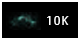
<style>
.page{position:relative;width:80px;height:40px;background:#000000}
.page>*{position:absolute;margin:0}
.t1{font:12px "DroidSansMono";letter-spacing:0.045em;color:#ffffff}
</style>
<div class="page">
<p class="t1" style="left:47px;top:16px;width:22px;height:9px">10K</p>
</div>
